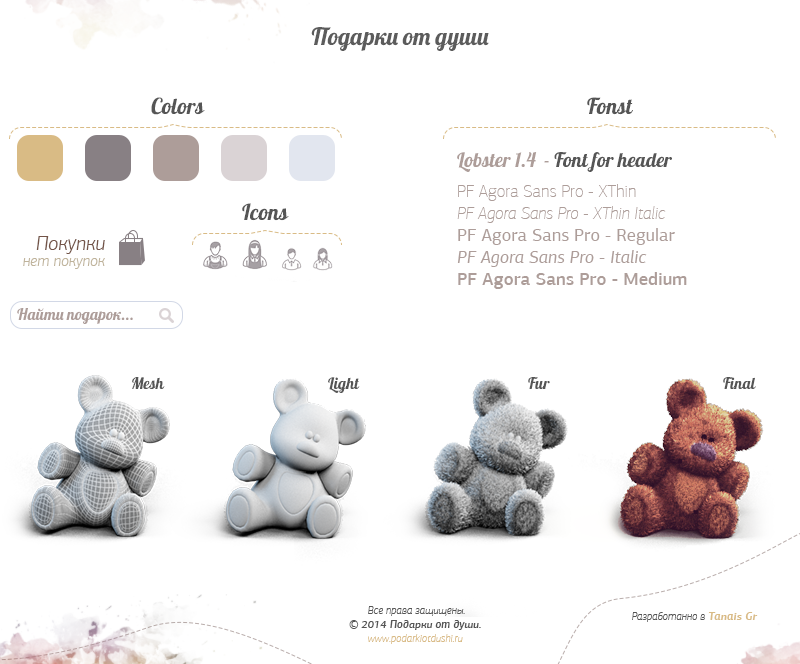
<style>
.page{position:relative;width:800px;height:664px;background:#ffffff}
.page>*{position:absolute;margin:0}
.t1{font:24px "Lobster";color:#5c5c5c}
.t2{font:22px "Lobster";color:#555555}
.t3{font:20px "Lobster";color:#ad9d99}
.t4{font:20px "Lobster";color:#555555}
.t5{font:18px/22px "PFAgoraSansPro-XThinItalic";color:#ad9d99}
.t6{font:18px/22px "PFAgoraSansPro-XThin";color:#ad9d99}
.t7{font:18px/22px "PFAgoraSansPro-Regular";color:#ad9d99}
.t8{font:18px/22px "PFAgoraSansPro-Italic";color:#ad9d99}
.t9{font:18px/22px "PFAgoraSansPro-Medium";color:#ad9d99}
.t10{font:20.8px "PFAgoraSansPro-LightItalic";color:#735448}
.t11{font:16px "PFAgoraSansPro-LightItalic";color:#bfb39b}
.t12{font:16px "Lobster";color:#ad9d99}
.t13{font:16px "Lobster";color:#555555}
.t14{font:11.2px "PFAgoraSansPro-ThinItalic";color:#555555}
.t15{font:11.2px "PFAgoraSansPro-BoldItalic";color:#d9bb85}
.t16{font:11.2px "PFAgoraSansPro-MediumItalic";color:#555555}
.t17{font:11.2px "PFAgoraSansPro-ThinItalic";color:#d9bb85}
</style>
<div class="page">
<p class="t1" style="left:311px;top:27px;width:178px;height:24px">Подарки от души</p>
<p class="t2" style="left:151px;top:97px;width:54px;height:18px">Colors</p>
<p class="t2" style="left:587px;top:97px;width:46px;height:18px">Fonst</p>
<p class="t3" style="left:457px;top:152px;width:80px;height:20px">Lobster 1.4</p>
<p class="t4" style="left:544px;top:152px;width:128px;height:20px"><span class="t3">- </span>Font for header</p>
<p class="t5" style="left:457px;top:184px;width:230px;height:105px"><span class="t6">PF Agora Sans Pro - XThin<br></span>PF Agora Sans Pro - XThin Italic<br><span class="t7">PF Agora Sans Pro - Regular<br></span><span class="t8">PF Agora Sans Pro - Italic<br></span><span class="t9">PF Agora Sans Pro - Medium</span></p>
<p class="t2" style="left:242px;top:203px;width:47px;height:18px">Icons</p>
<p class="t10" style="left:36px;top:236px;width:69px;height:18px">Покупки</p>
<p class="t11" style="left:23px;top:258px;width:82px;height:11px">нет покупок</p>
<p class="t12" style="left:17px;top:308px;width:116px;height:16px">Найти подарок...</p>
<p class="t13" style="left:132px;top:377px;width:33px;height:12px">Mesh</p>
<p class="t13" style="left:328px;top:377px;width:32px;height:16px">Light</p>
<p class="t13" style="left:528px;top:377px;width:22px;height:12px">Fur</p>
<p class="t13" style="left:723px;top:377px;width:33px;height:12px">Final</p>
<p class="t14" style="left:368px;top:606px;width:97px;height:10px">Все права защищены.</p>
<p class="t14" style="left:632px;top:612px;width:126px;height:10px">Разработанно в <span class="t15">Tanais Gr</span></p>
<p class="t16" style="left:349px;top:620px;width:132px;height:24px;text-align:center">© 2014 Подарки от души. <br><span class="t17">www.podarkiotdushi.ru</span></p>
</div>
